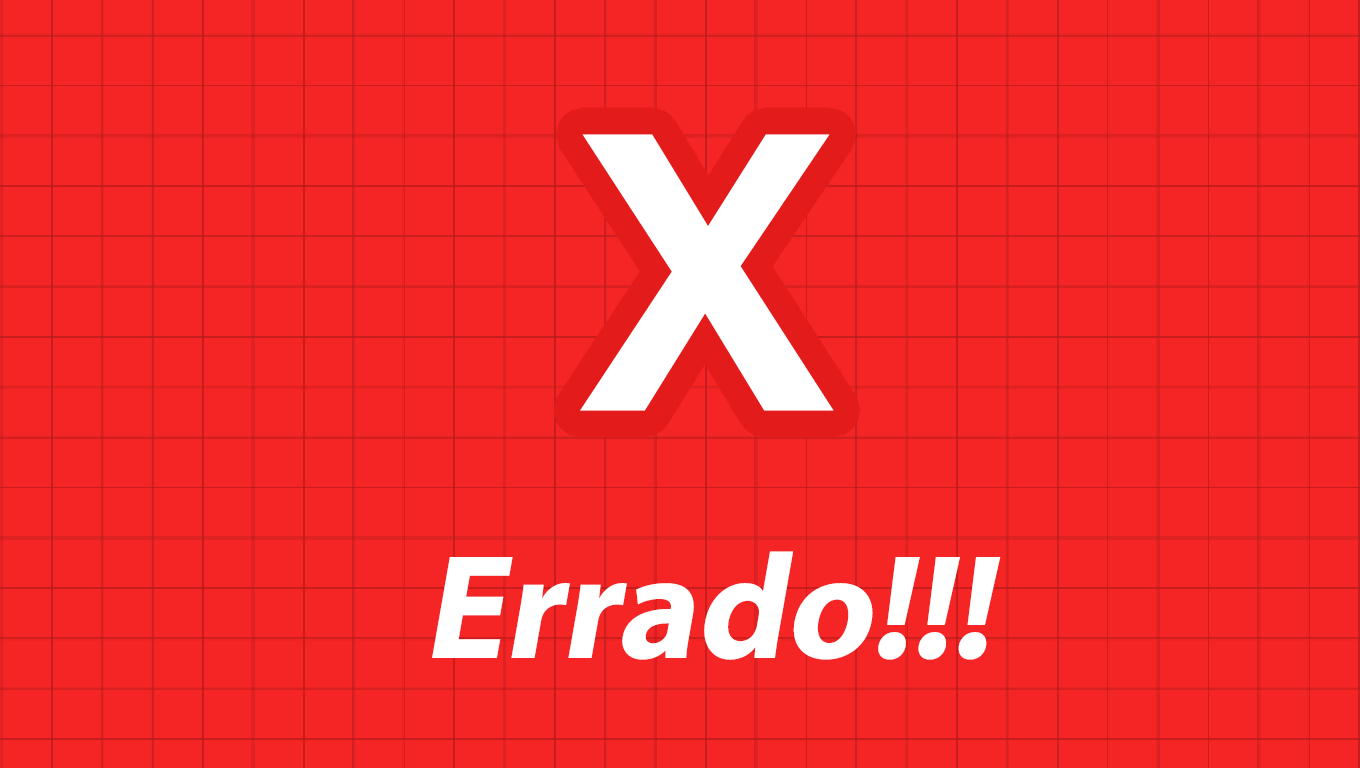
<style>
.page{position:relative;width:1360px;height:768px;background:#f52525}
.page>*{position:absolute;margin:0}
.t1{font:400px "AcuminConcept-Bold";color:#ffffff;font-style:italic}
.t2{font:150px "MyriadPro-Bold";color:#ffffff;font-style:italic}
</style>
<div class="page">
<p class="t1" style="left:580px;top:134px;width:254px;height:277px">X</p>
<p class="t2" style="left:432px;top:551px;width:569px;height:109px">!!!Errado</p>
</div>
